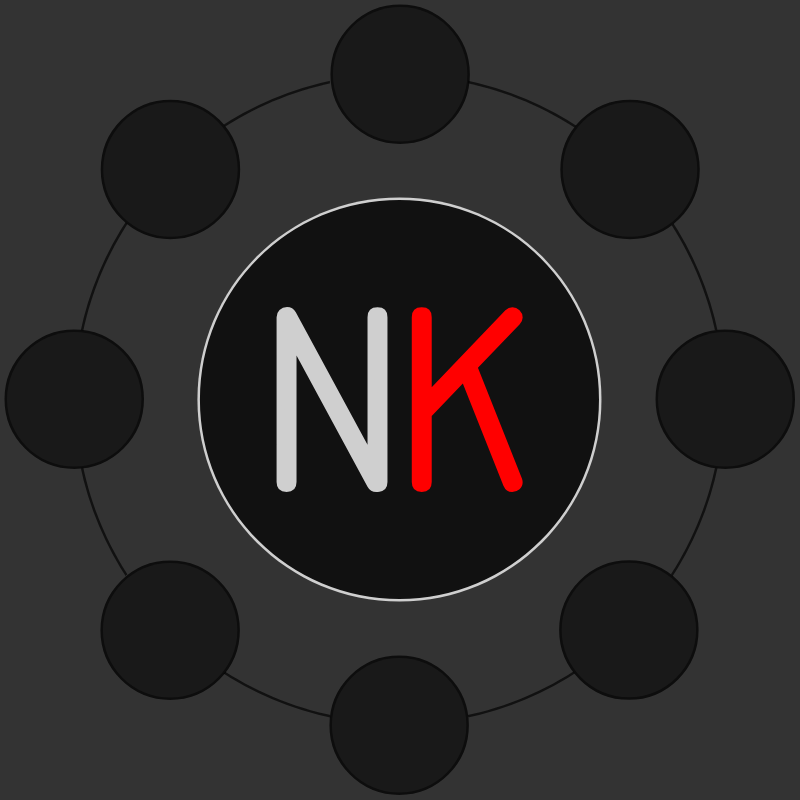
<style>
.page{position:relative;width:800px;height:800px;background:#333333}
.page>*{position:absolute;margin:0}
.t1{font:243.2px "RenderingJNL";color:#cfcfcf}
.t2{font:243.2px "RenderingJNL";color:#ff0000}
</style>
<div class="page">
<p class="t1" style="left:276px;top:306px;width:247px;height:188px">N<span class="t2">K</span></p>
</div>
